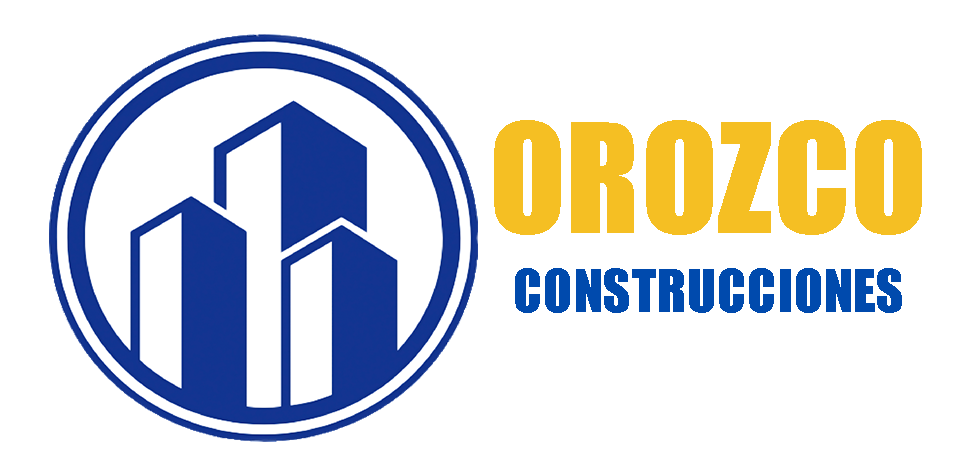
<style>
.page{position:relative;width:970px;height:473px;background:#ffffff}
.page>*{position:absolute;margin:0}
.t1{font:140px "Impact";color:#f5bf23}
.t2{font:55px "Impact";color:#004aad}
</style>
<div class="page">
<p class="t1" style="left:494px;top:120px;width:428px;height:115px">OROZCO</p>
<p class="t2" style="left:515px;top:268px;width:387px;height:45px">CONSTRUCCIONES</p>
</div>
